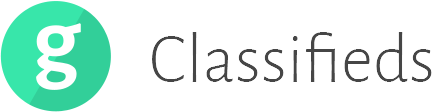
<style>
.page{position:relative;width:438px;height:112px;background:#ffffff}
.page>*{position:absolute;margin:0}
.t1{font:71.4px "AlegreyaSans-Light";color:#464646}
</style>
<div class="page">
<p class="t1" style="left:152px;top:32px;width:280px;height:50px">Classifieds</p>
</div>
